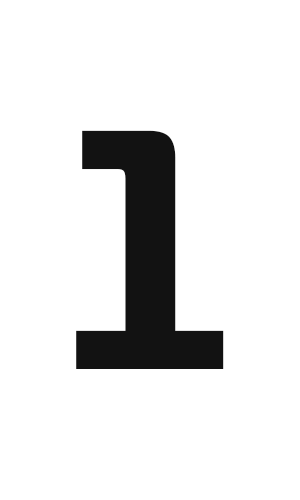
<style>
.page{position:relative;width:300px;height:500px;background:#ffffff}
.page>*{position:absolute;margin:0}
.t1{font:335px "GyeonggiTitleV";color:#121212}
</style>
<div class="page">
<p class="t1" style="left:76px;top:130px;width:148px;height:239px">1</p>
</div>
